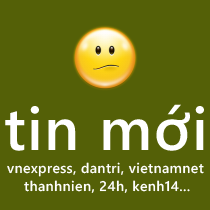
<style>
.page{position:relative;width:210px;height:210px;background:#546007}
.page>*{position:absolute;margin:0}
.t1{font:60px "SegoeWP-Semibold";letter-spacing:0.025em;color:#ffffff}
.t2{font:14px "SegoeWP-Semibold";letter-spacing:0.025em;color:#fefefe}
.t3{font:14px "SegoeWP-Semibold";letter-spacing:0.025em;color:#ffffff}
</style>
<div class="page">
<p class="t1" style="left:5px;top:104px;width:199px;height:47px">tin mới</p>
<p class="t2" style="left:7px;top:162px;width:197px;height:15px">vnexpress, dantri, vietnamnet</p>
<p class="t3" style="left:24px;top:180px;width:166px;height:13px">thanhnien, 24h, kenh14...</p>
</div>
